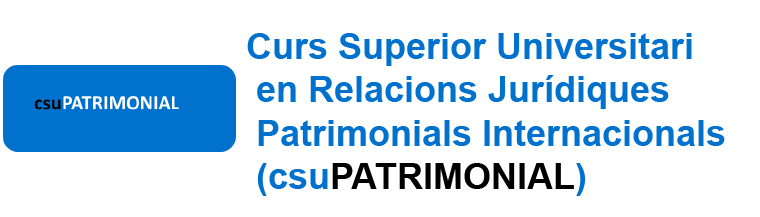
<style>
.page{position:relative;width:760px;height:217px;background:#ffffff}
.page>*{position:absolute;margin:0}
.t1{font:36px "Arial-BoldMT";color:#0072ce}
.t2{font:36px "Arial-BoldMT";color:#000000}
</style>
<div class="page">
<p class="t1" style="left:247px;top:33px;width:478px;height:163px">Curs Superior Universitari<br> en Relacions Jurídiques<br> Patrimonials Internacionals<br> (csu<span class="t2">PATRIMONIAL</span>)</p>
</div>
